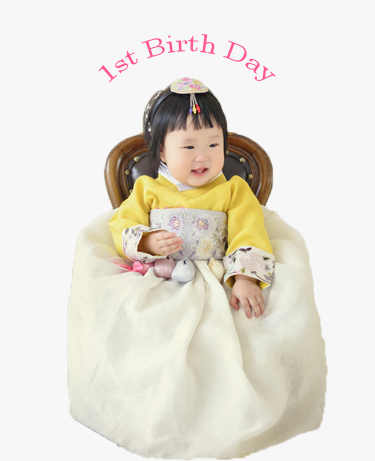
<style>
.page{position:relative;width:375px;height:461px;background:#f7f7f7}
.page>*{position:absolute;margin:0}
.t1{font:24px/72px "CenturySchoolbook";color:#fe568d}
</style>
<div class="page">
<p class="t1" style="left:98px;top:34px;width:178px;height:49px;text-align:center">1st Birth Day</p>
</div>
